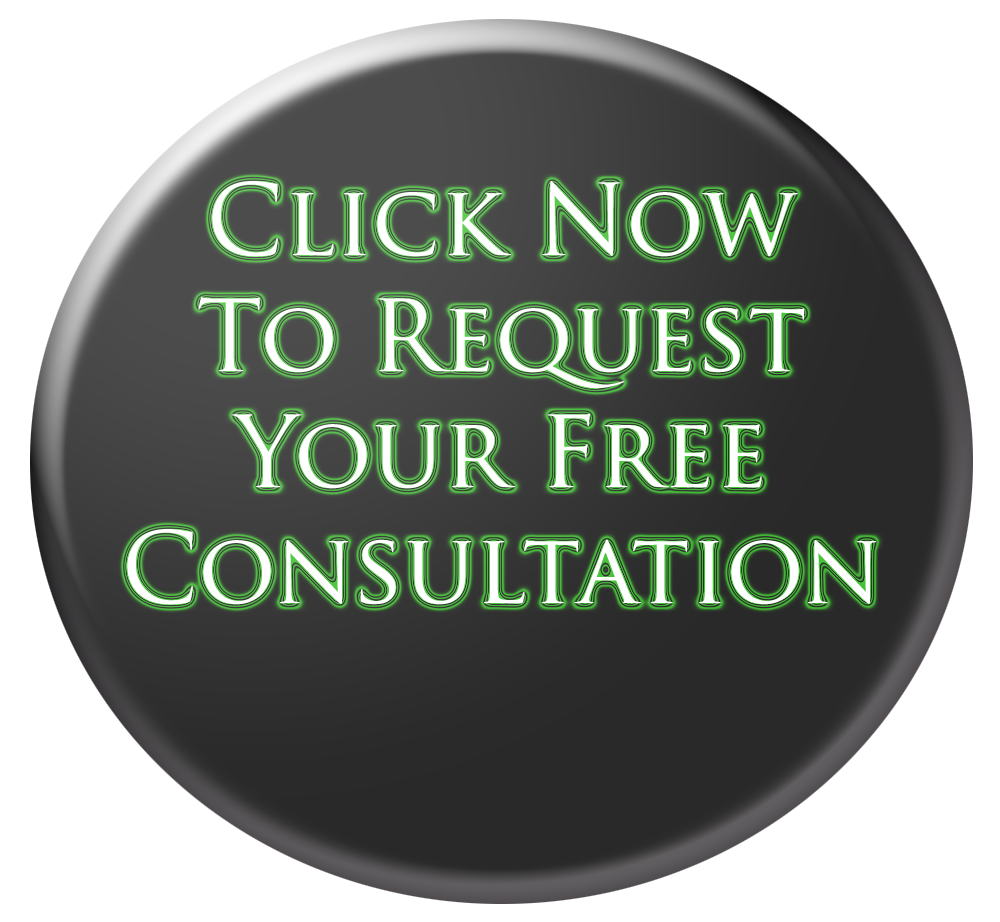
<style>
.page{position:relative;width:1000px;height:922px;background:#ffffff}
.page>*{position:absolute;margin:0}
.t1{font:96.6px "TrajanPro-Regular";color:#ffffff}
</style>
<div class="page">
<p class="t1" style="left:127px;top:181px;width:750px;height:424px;text-align:center">Click Now<br>To Request<br>Your Free<br>Consultation</p>
</div>
